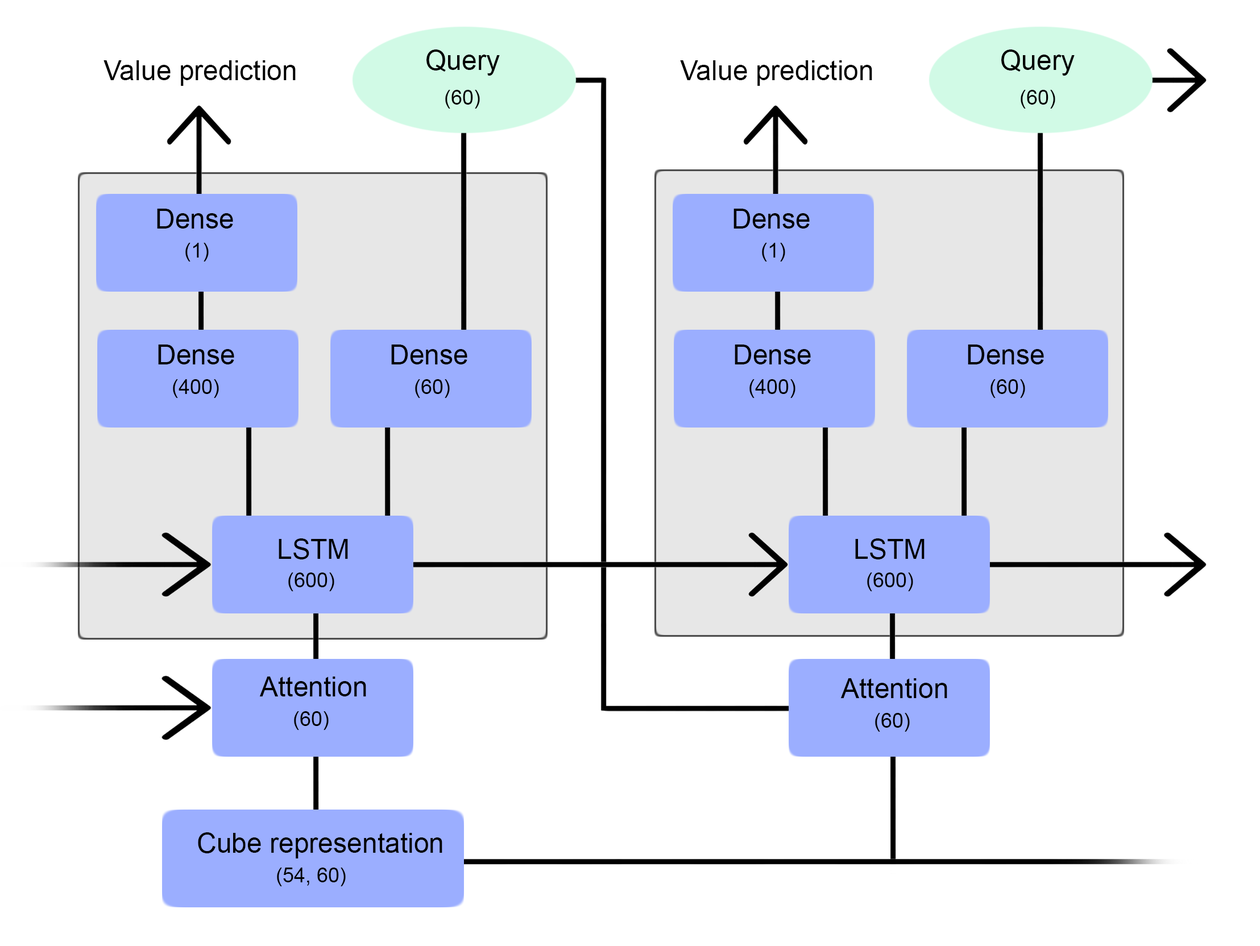
<style>
.page{position:relative;width:1260px;height:946px;background:#ffffff}
.page>*{position:absolute;margin:0}
.t1{font:27.3px "ArialMT";color:#000000}
.t2{font:20.5px "ArialMT";color:#000000}
</style>
<div class="page">
<p class="t1" style="left:426px;top:49px;width:74px;height:27px">Query</p>
<p class="t1" style="left:1001px;top:49px;width:74px;height:27px">Query</p>
<p class="t1" style="left:103px;top:60px;width:193px;height:26px">Value prediction</p>
<p class="t1" style="left:680px;top:60px;width:192px;height:26px">Value prediction</p>
<p class="t2" style="left:445px;top:90px;width:35px;height:19px">(60)</p>
<p class="t2" style="left:1021px;top:90px;width:34px;height:19px">(60)</p>
<p class="t1" style="left:157px;top:209px;width:76px;height:20px">Dense</p>
<p class="t1" style="left:734px;top:209px;width:76px;height:20px">Dense</p>
<p class="t2" style="left:185px;top:243px;width:24px;height:19px">(1)</p>
<p class="t2" style="left:762px;top:243px;width:23px;height:19px">(1)</p>
<p class="t1" style="left:158px;top:345px;width:76px;height:20px">Dense</p>
<p class="t1" style="left:391px;top:345px;width:76px;height:20px">Dense</p>
<p class="t1" style="left:735px;top:345px;width:76px;height:20px">Dense</p>
<p class="t1" style="left:968px;top:345px;width:76px;height:20px">Dense</p>
<p class="t2" style="left:173px;top:379px;width:46px;height:19px">(400)</p>
<p class="t2" style="left:415px;top:379px;width:35px;height:19px">(60)</p>
<p class="t2" style="left:749px;top:379px;width:47px;height:19px">(400)</p>
<p class="t2" style="left:991px;top:379px;width:34px;height:19px">(60)</p>
<p class="t1" style="left:279px;top:539px;width:69px;height:21px">LSTM</p>
<p class="t1" style="left:855px;top:539px;width:70px;height:21px">LSTM</p>
<p class="t2" style="left:288px;top:573px;width:46px;height:18px">(600)</p>
<p class="t2" style="left:867px;top:573px;width:46px;height:18px">(600)</p>
<p class="t1" style="left:259px;top:677px;width:107px;height:20px">Attention</p>
<p class="t1" style="left:840px;top:678px;width:107px;height:20px">Attention</p>
<p class="t2" style="left:294px;top:711px;width:35px;height:19px">(60)</p>
<p class="t2" style="left:875px;top:713px;width:35px;height:19px">(60)</p>
<p class="t1" style="left:198px;top:833px;width:244px;height:26px">Cube representation</p>
<p class="t2" style="left:277px;top:868px;width:69px;height:19px">(54, 60)</p>
</div>
